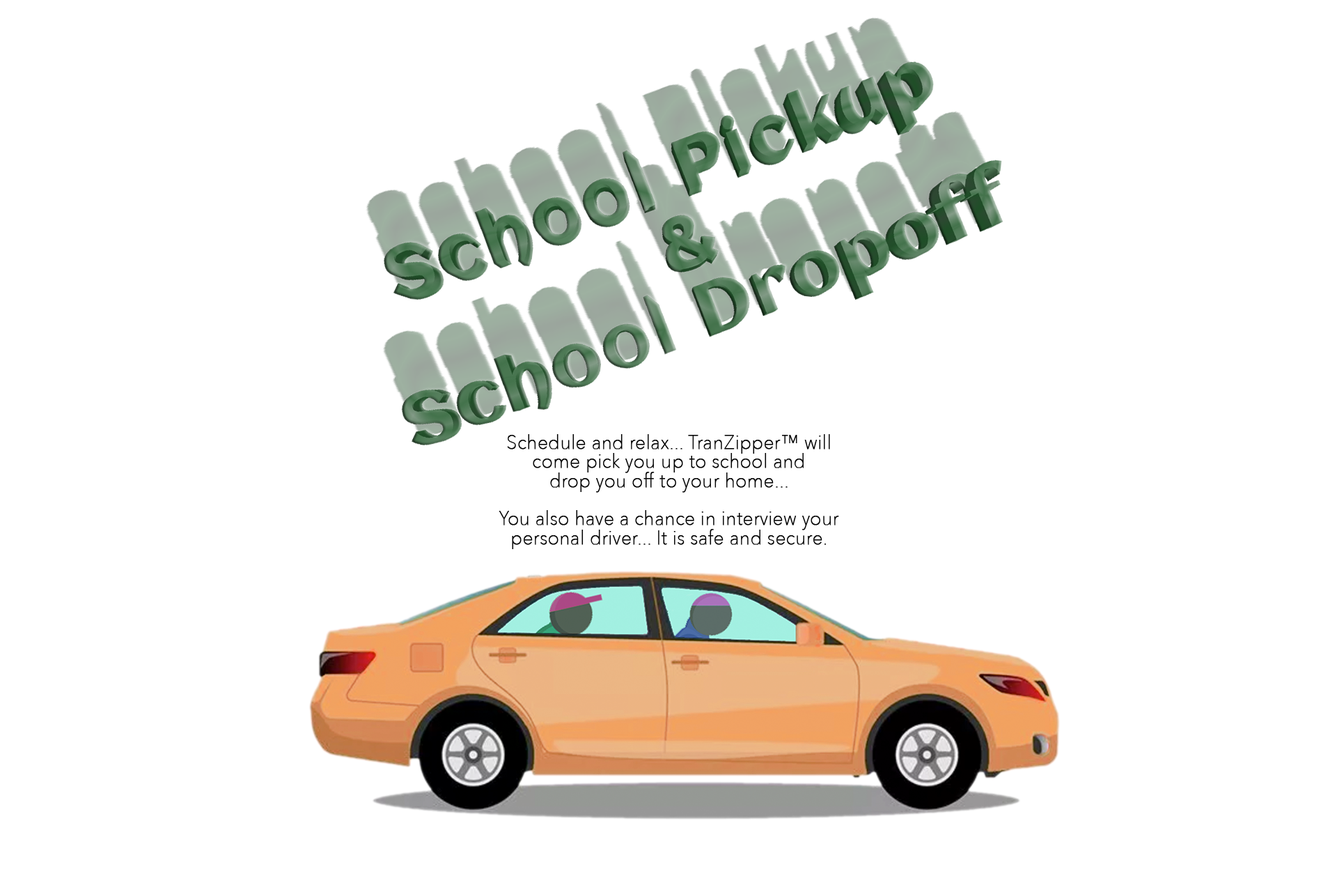
<style>
.page{position:relative;width:1337px;height:892px;background:#ffffff}
.page>*{position:absolute;margin:0}
.t1{font:19.2px/19.1px "AvenirNext-UltraLight";color:#000000;font-weight:bold;scale:0.95 1}
</style>
<div class="page">
<p class="t1" style="left:499px;top:434px;width:340px;height:115px;text-align:center">Schedule and relax... TranZipper™ will<br>come pick you up to school and<br>drop you off to your home...<br><br>You also have a chance in interview your<br>personal driver... It is safe and secure.</p>
</div>
